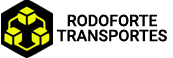
<style>
.page{position:relative;width:173px;height:58px;background:#ffffff}
.page>*{position:absolute;margin:0}
.t1{font:16px/15px "Roboto-Medium";color:#000000}
.t2{font:16px "Roboto-Medium";color:#000000}
</style>
<div class="page">
<p class="t1" style="left:57px;top:14px;width:110px;height:28px;text-align:center"><span class="t2">RO</span>DOFORTE<br>TRANSPORTES</p>
</div>
